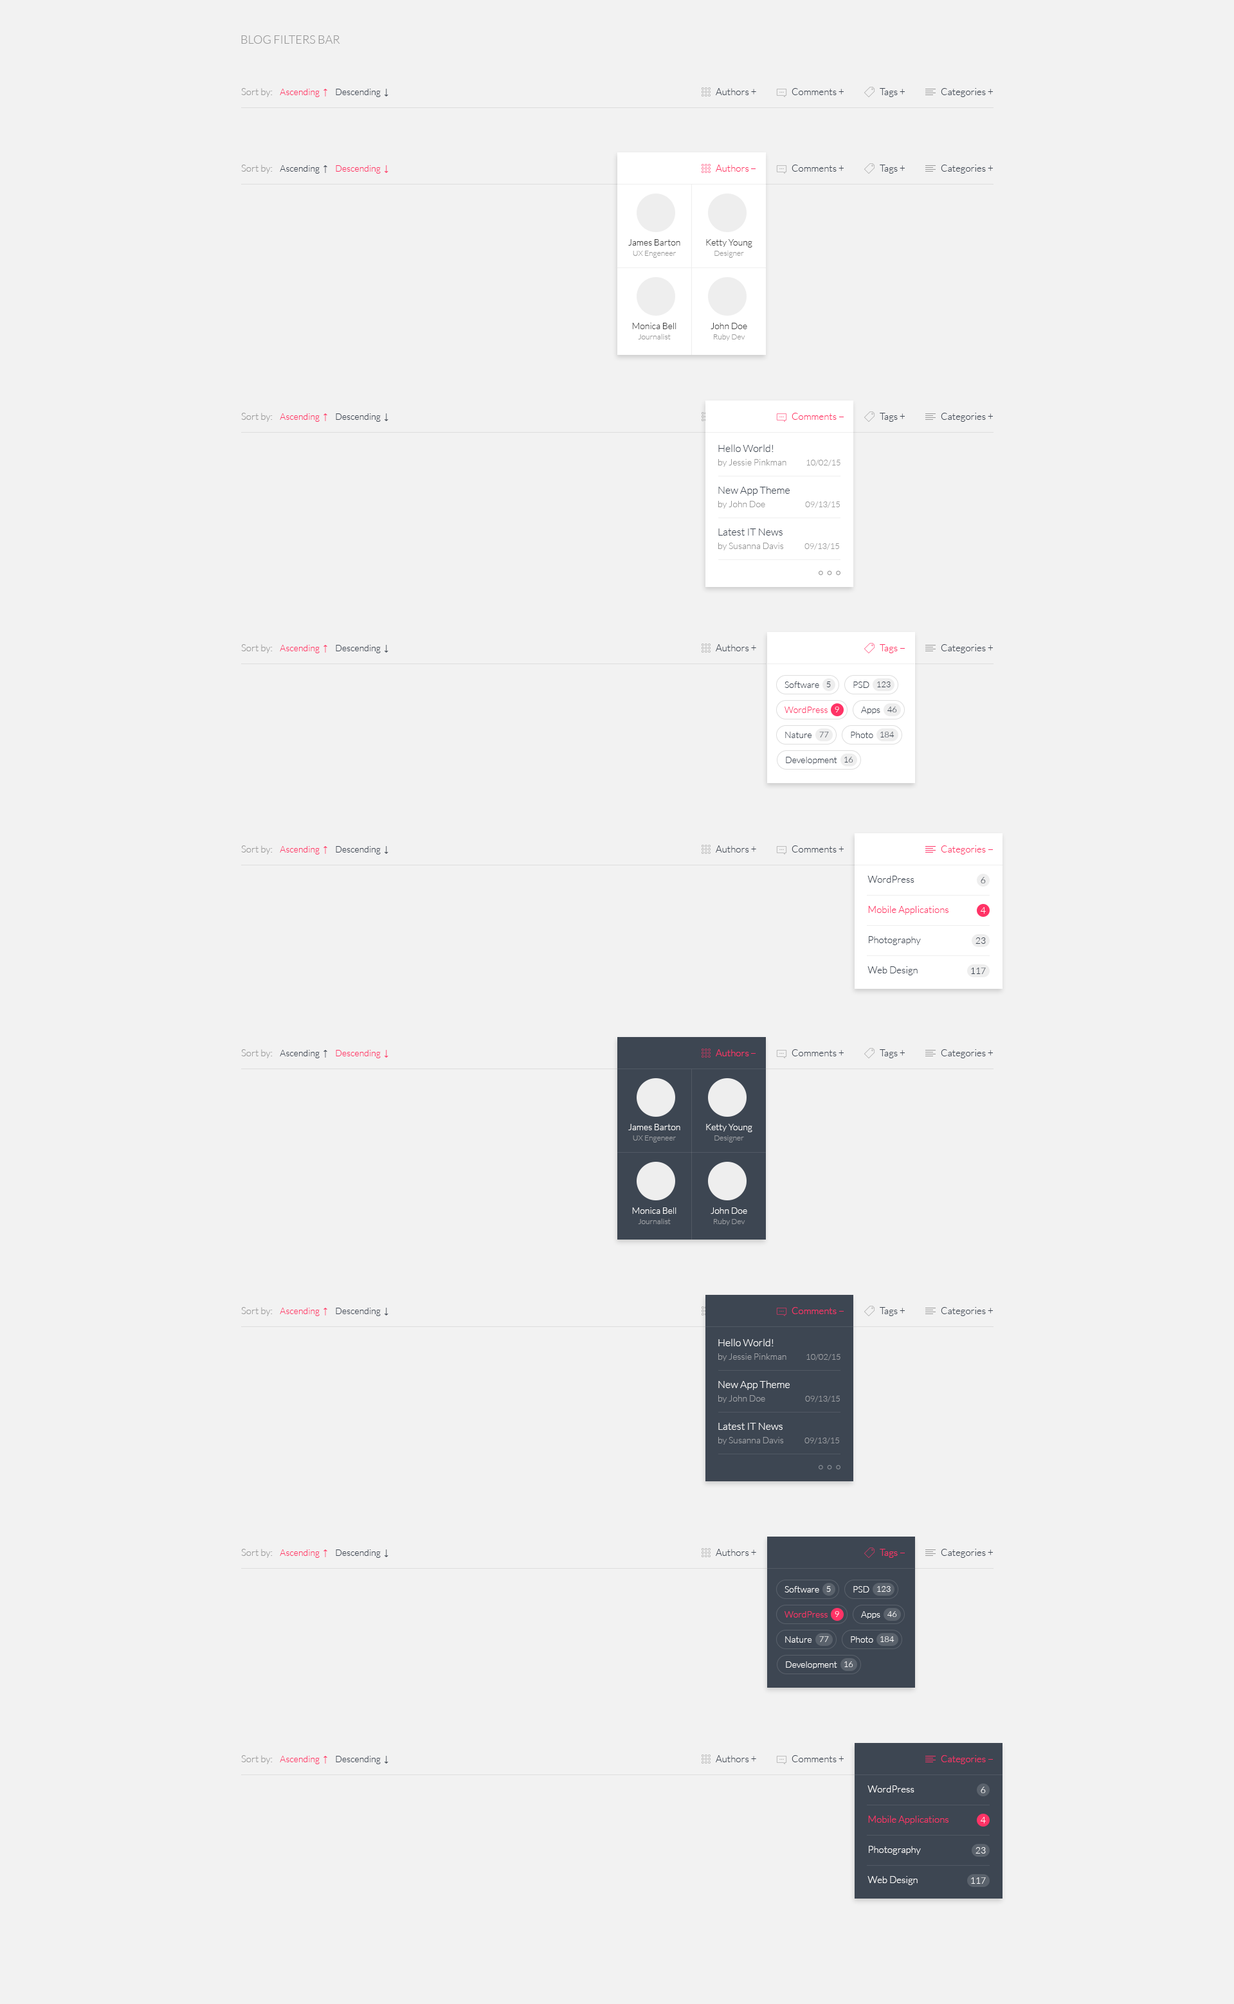
<style>
.page{position:relative;width:1234px;height:2004px;background:#f2f2f2}
.page>*{position:absolute;margin:0}
.t1{font:11.6px "Lato-Light";color:#999999;text-transform:uppercase}
.t2{font:9.8px "Lato-Light";color:#999999}
.t3{font:9px "Lato-Light";color:#ff3366}
.t4{font:9px "TimesNewRomanPSMT";color:#ff3366}
.t5{font:9px "Lato-Light";color:#3d4652}
.t6{font:9px "TimesNewRomanPSMT";color:#3d4652}
.t7{font:9.8px "Lato-Light";color:#3d4652}
.t8{font:9.6px "Lato-Light";color:#3d4652}
.t9{font:9.8px "Lato-Light";color:#ff3366}
.t10{font:9px "Lato-Light";color:#404040}
.t11{font:7.7px "Lato-Light";color:#999999}
.t12{font:9.6px "Lato-Light";color:#ff3366}
.t13{font:10.3px "Lato-Light";color:#3d4652}
.t14{font:9px "Lato-Light";color:#999999}
.t15{font:8.4px "Lato-Light";color:#999999}
.t16{font:8.4px "Lato-Light";color:#3d4652}
.t17{font:8.4px "Lato-Light";color:#ffffff}
.t18{font:8.4px "Lato-Light"}
.t19{font:9px "Lato-Light";color:#ffffff}
.t20{font:9px "Lato-Light";color:#fefefe}
.t21{font:7.7px "Lato-Light";color:#9da0a5}
.t22{font:10.3px "Lato-Light";color:#ffffff}
.t23{font:9px "Lato-Light";color:#9da0a5}
.t24{font:8.4px "Lato-Light";color:#9da0a5}
.t25{font:8.4px "Lato-Light";color:#fefefe}
.t26{font:9.6px "Lato-Light";color:#ffffff}
</style>
<div class="page">
<p class="t1" style="left:241px;top:35px;width:99px;height:9px">Blog Filters Bar</p>
<p class="t2" style="left:241px;top:88px;width:32px;height:9px">Sort by:</p>
<p class="t3" style="left:280px;top:89px;width:47px;height:8px">Ascending  <span class="t4">↑</span></p>
<p class="t5" style="left:336px;top:89px;width:52px;height:8px">Descending  <span class="t6">↓</span></p>
<p class="t7" style="left:716px;top:88px;width:40px;height:7px">Authors +</p>
<p class="t8" style="left:791px;top:88px;width:52px;height:7px">Comments +</p>
<p class="t8" style="left:879px;top:88px;width:26px;height:9px">Tags +</p>
<p class="t8" style="left:941px;top:88px;width:52px;height:9px">Categories +</p>
<p class="t2" style="left:241px;top:165px;width:32px;height:9px">Sort by:</p>
<p class="t5" style="left:280px;top:165px;width:47px;height:9px">Ascending  <span class="t6">↑</span></p>
<p class="t3" style="left:336px;top:165px;width:52px;height:9px">Descending  <span class="t4">↓</span></p>
<p class="t9" style="left:716px;top:165px;width:33px;height:7px">Authors</p>
<p class="t8" style="left:791px;top:165px;width:52px;height:7px">Comments +</p>
<p class="t8" style="left:879px;top:165px;width:26px;height:9px">Tags +</p>
<p class="t8" style="left:941px;top:165px;width:52px;height:9px">Categories +</p>
<p class="t10" style="left:628px;top:239px;width:52px;height:7px">James Barton</p>
<p class="t10" style="left:706px;top:239px;width:46px;height:9px">Ketty Young</p>
<p class="t11" style="left:633px;top:251px;width:43px;height:7px">UX Engeneer</p>
<p class="t11" style="left:714px;top:251px;width:30px;height:7px">Designer</p>
<p class="t10" style="left:632px;top:323px;width:44px;height:6px">Monica Bell</p>
<p class="t10" style="left:710px;top:323px;width:37px;height:6px">John Doe</p>
<p class="t11" style="left:638px;top:334px;width:32px;height:5px">Journalist</p>
<p class="t11" style="left:714px;top:334px;width:31px;height:7px">Ruby Dev</p>
<p class="t2" style="left:241px;top:413px;width:32px;height:9px">Sort by:</p>
<p class="t3" style="left:280px;top:413px;width:47px;height:9px">Ascending  <span class="t4">↑</span></p>
<p class="t5" style="left:336px;top:413px;width:52px;height:9px">Descending  <span class="t6">↓</span></p>
<p class="t12" style="left:791px;top:413px;width:45px;height:7px">Comments</p>
<p class="t8" style="left:879px;top:413px;width:26px;height:9px">Tags +</p>
<p class="t8" style="left:941px;top:413px;width:52px;height:9px">Categories +</p>
<p class="t13" style="left:718px;top:444px;width:55px;height:8px">Hello World!</p>
<p class="t14" style="left:718px;top:459px;width:122px;height:8px">by Jessie Pinkman           <span class="t15">10/02/15</span></p>
<p class="t13" style="left:718px;top:486px;width:71px;height:10px">New App Theme</p>
<p class="t14" style="left:718px;top:501px;width:122px;height:8px">by John Doe                       <span class="t15">09/13/15</span></p>
<p class="t13" style="left:718px;top:528px;width:64px;height:8px">Latest IT News</p>
<p class="t14" style="left:718px;top:543px;width:121px;height:7px">by Susanna Davis            <span class="t15">09/13/15</span></p>
<p class="t2" style="left:241px;top:644px;width:32px;height:9px">Sort by:</p>
<p class="t3" style="left:280px;top:645px;width:47px;height:8px">Ascending  <span class="t4">↑</span></p>
<p class="t5" style="left:336px;top:645px;width:52px;height:8px">Descending  <span class="t6">↓</span></p>
<p class="t7" style="left:716px;top:644px;width:40px;height:7px">Authors +</p>
<p class="t12" style="left:879px;top:644px;width:18px;height:9px">Tags</p>
<p class="t8" style="left:941px;top:644px;width:52px;height:9px">Categories +</p>
<p class="t5" style="left:784px;top:681px;width:35px;height:7px">Software</p>
<p class="t16" style="left:826px;top:681px;width:5px;height:6px">5</p>
<p class="t5" style="left:853px;top:681px;width:16px;height:7px">PSD</p>
<p class="t16" style="left:877px;top:681px;width:13px;height:6px">123</p>
<p class="t3" style="left:784px;top:706px;width:43px;height:7px">WordPress</p>
<p class="t17" style="left:834px;top:706px;width:5px;height:6px">9</p>
<p class="t5" style="left:861px;top:706px;width:19px;height:8px">Apps</p>
<p class="t16" style="left:887px;top:706px;width:10px;height:6px">46</p>
<p class="t5" style="left:785px;top:732px;width:27px;height:6px">Nature</p>
<p class="t18" style="left:819px;top:732px;width:10px;height:5px">77</p>
<p class="t5" style="left:851px;top:732px;width:22px;height:6px">Photo</p>
<p class="t16" style="left:880px;top:732px;width:14px;height:5px">184</p>
<p class="t5" style="left:786px;top:757px;width:51px;height:7px">Development</p>
<p class="t16" style="left:844px;top:757px;width:9px;height:5px">16</p>
<p class="t2" style="left:241px;top:845px;width:32px;height:9px">Sort by:</p>
<p class="t7" style="left:716px;top:845px;width:40px;height:7px">Authors +</p>
<p class="t8" style="left:791px;top:845px;width:52px;height:7px">Comments +</p>
<p class="t12" style="left:941px;top:845px;width:45px;height:9px">Categories</p>
<p class="t3" style="left:280px;top:846px;width:47px;height:8px">Ascending  <span class="t4">↑</span></p>
<p class="t5" style="left:336px;top:846px;width:52px;height:8px">Descending  <span class="t6">↓</span></p>
<p class="t8" style="left:867px;top:876px;width:47px;height:7px">WordPress</p>
<p class="t5" style="left:980px;top:877px;width:6px;height:6px">6</p>
<p class="t12" style="left:868px;top:906px;width:80px;height:9px">Mobile Applications</p>
<p class="t19" style="left:980px;top:907px;width:6px;height:7px">4</p>
<p class="t8" style="left:869px;top:936px;width:52px;height:9px">Photography</p>
<p class="t5" style="left:975px;top:937px;width:11px;height:7px">23</p>
<p class="t8" style="left:867px;top:966px;width:50px;height:9px">Web Design</p>
<p class="t5" style="left:971px;top:968px;width:15px;height:6px">117</p>
<p class="t2" style="left:241px;top:1049px;width:32px;height:9px">Sort by:</p>
<p class="t5" style="left:280px;top:1050px;width:47px;height:8px">Ascending  <span class="t6">↑</span></p>
<p class="t3" style="left:336px;top:1050px;width:52px;height:8px">Descending  <span class="t4">↓</span></p>
<p class="t9" style="left:716px;top:1049px;width:33px;height:7px">Authors</p>
<p class="t8" style="left:791px;top:1049px;width:52px;height:7px">Comments +</p>
<p class="t8" style="left:879px;top:1049px;width:26px;height:9px">Tags +</p>
<p class="t8" style="left:941px;top:1049px;width:52px;height:9px">Categories +</p>
<p class="t20" style="left:628px;top:1124px;width:52px;height:6px">James Barton</p>
<p class="t19" style="left:706px;top:1124px;width:46px;height:8px">Ketty Young</p>
<p class="t21" style="left:633px;top:1135px;width:43px;height:7px">UX Engeneer</p>
<p class="t21" style="left:714px;top:1135px;width:30px;height:7px">Designer</p>
<p class="t19" style="left:632px;top:1207px;width:44px;height:7px">Monica Bell</p>
<p class="t19" style="left:710px;top:1207px;width:37px;height:7px">John Doe</p>
<p class="t21" style="left:638px;top:1218px;width:32px;height:6px">Journalist</p>
<p class="t21" style="left:714px;top:1218px;width:31px;height:7px">Ruby Dev</p>
<p class="t2" style="left:241px;top:1307px;width:32px;height:9px">Sort by:</p>
<p class="t3" style="left:280px;top:1308px;width:47px;height:8px">Ascending  <span class="t4">↑</span></p>
<p class="t5" style="left:336px;top:1308px;width:52px;height:8px">Descending  <span class="t6">↓</span></p>
<p class="t12" style="left:791px;top:1307px;width:45px;height:7px">Comments</p>
<p class="t8" style="left:879px;top:1307px;width:26px;height:9px">Tags +</p>
<p class="t8" style="left:941px;top:1307px;width:52px;height:9px">Categories +</p>
<p class="t22" style="left:718px;top:1338px;width:55px;height:8px">Hello World!</p>
<p class="t23" style="left:718px;top:1353px;width:122px;height:8px">by Jessie Pinkman           <span class="t24">10/02/15</span></p>
<p class="t22" style="left:718px;top:1380px;width:71px;height:10px">New App Theme</p>
<p class="t23" style="left:718px;top:1395px;width:122px;height:8px">by John Doe                       <span class="t24">09/13/15</span></p>
<p class="t22" style="left:718px;top:1423px;width:64px;height:7px">Latest IT News</p>
<p class="t23" style="left:718px;top:1437px;width:121px;height:7px">by Susanna Davis            <span class="t24">09/13/15</span></p>
<p class="t2" style="left:241px;top:1549px;width:32px;height:9px">Sort by:</p>
<p class="t3" style="left:280px;top:1549px;width:47px;height:9px">Ascending  <span class="t4">↑</span></p>
<p class="t5" style="left:336px;top:1549px;width:52px;height:9px">Descending  <span class="t6">↓</span></p>
<p class="t7" style="left:716px;top:1549px;width:40px;height:7px">Authors +</p>
<p class="t12" style="left:879px;top:1549px;width:18px;height:9px">Tags</p>
<p class="t8" style="left:941px;top:1549px;width:52px;height:9px">Categories +</p>
<p class="t19" style="left:784px;top:1586px;width:35px;height:6px">Software</p>
<p class="t17" style="left:826px;top:1586px;width:5px;height:6px">5</p>
<p class="t19" style="left:853px;top:1586px;width:16px;height:6px">PSD</p>
<p class="t17" style="left:877px;top:1586px;width:13px;height:6px">123</p>
<p class="t3" style="left:784px;top:1611px;width:43px;height:6px">WordPress</p>
<p class="t17" style="left:834px;top:1611px;width:5px;height:6px">9</p>
<p class="t19" style="left:861px;top:1611px;width:19px;height:8px">Apps</p>
<p class="t17" style="left:887px;top:1611px;width:10px;height:6px">46</p>
<p class="t19" style="left:785px;top:1636px;width:27px;height:7px">Nature</p>
<p class="t18" style="left:819px;top:1636px;width:10px;height:6px">77</p>
<p class="t19" style="left:851px;top:1636px;width:22px;height:7px">Photo</p>
<p class="t17" style="left:880px;top:1636px;width:14px;height:6px">184</p>
<p class="t19" style="left:786px;top:1661px;width:51px;height:8px">Development</p>
<p class="t25" style="left:844px;top:1661px;width:9px;height:6px">16</p>
<p class="t2" style="left:241px;top:1755px;width:32px;height:9px">Sort by:</p>
<p class="t3" style="left:280px;top:1756px;width:47px;height:8px">Ascending  <span class="t4">↑</span></p>
<p class="t5" style="left:336px;top:1756px;width:52px;height:8px">Descending  <span class="t6">↓</span></p>
<p class="t7" style="left:716px;top:1755px;width:40px;height:7px">Authors +</p>
<p class="t8" style="left:791px;top:1755px;width:52px;height:7px">Comments +</p>
<p class="t12" style="left:941px;top:1755px;width:45px;height:9px">Categories</p>
<p class="t26" style="left:867px;top:1785px;width:47px;height:7px">WordPress</p>
<p class="t19" style="left:980px;top:1787px;width:6px;height:6px">6</p>
<p class="t12" style="left:868px;top:1815px;width:80px;height:9px">Mobile Applications</p>
<p class="t19" style="left:980px;top:1817px;width:6px;height:6px">4</p>
<p class="t26" style="left:869px;top:1846px;width:52px;height:9px">Photography</p>
<p class="t19" style="left:975px;top:1847px;width:11px;height:6px">23</p>
<p class="t26" style="left:867px;top:1876px;width:50px;height:9px">Web Design</p>
<p class="t19" style="left:971px;top:1877px;width:15px;height:7px">117</p>
</div>
